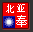
<style>
.page{position:relative;width:33px;height:32px;background:#f20000}
.page>*{position:absolute;margin:0}
.t1{font:10.4px "SimSun";color:#ffffff}
.t2{font:11.7px "SimSun";color:#ffffff}
</style>
<div class="page">
<p class="t1" style="left:6px;top:4px;width:19px;height:9px">北亚</p>
<p class="t2" style="left:16px;top:15px;width:11px;height:12px">奉</p>
</div>
